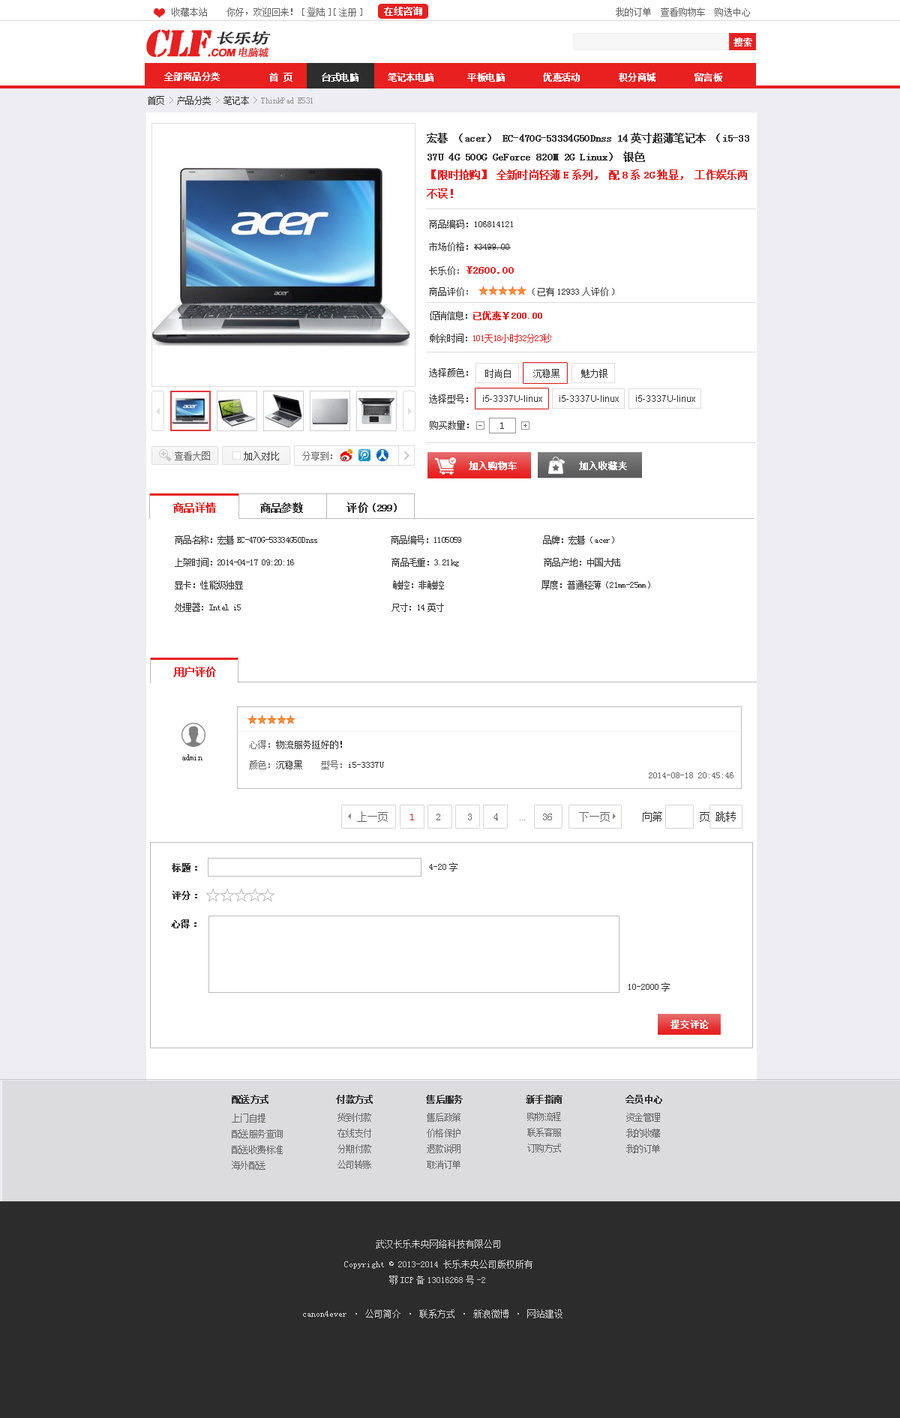
<style>
.page{position:relative;width:900px;height:1418px;background:#ffffff}
.page>*{position:absolute;margin:0}
.t1{font:9px "SimSun";color:#666666}
.t2{font:9px "SimSun";color:#ffffff;font-weight:bold}
.t3{font:34.5px "StencilStd";letter-spacing:-0.05em;color:#e82020;font-weight:bold;font-style:italic}
.t4{font:10.5px "StencilStd";letter-spacing:-0.05em;color:#e82020;font-weight:bold;font-style:italic}
.t5{font:10.5px "Arial-BoldMT";letter-spacing:-0.05em;color:#e82020;font-weight:bold;font-style:italic}
.t6{font:10.5px "AdobeHeitiStd-Regular";letter-spacing:-0.05em;color:#e82020;font-weight:bold;font-style:italic}
.t7{font:14.2px "AdobeHeitiStd-Regular";letter-spacing:-0.05em;color:#2d2d2d;font-weight:bold;font-style:italic;scale:1.26 1}
.t8{font:9px "SimSun";letter-spacing:-0.05em;color:#ffffff;font-weight:bold}
.t9{font:9px "SimSun";letter-spacing:-0.05em;color:#999999}
.t10{font:9px "SimSun";letter-spacing:-0.05em;color:#333333}
.t11{font:10.5px "SimSun";letter-spacing:-0.05em;color:#333333;font-weight:bold}
.t12{font:10.5px "SimSun";letter-spacing:-0.05em;color:#e82020;font-weight:bold}
.t13{font:9px/22.5px "SimSun";color:#333333}
.t14{font:9px/22.5px "SimSun";color:#666666}
.t15{font:10.5px/22.5px "SimSun";color:#e82020;font-weight:bold}
.t16{font:9px/18px "SimSun";letter-spacing:-0.05em;color:#e82020}
.t17{font:9px/18px "SimSun";letter-spacing:-0.05em;color:#333333}
.t18{font:9px/22.5px "SimSun";color:#e82020;font-weight:bold}
.t19{font:9px "SimSun";color:#333333}
.t20{font:9px "ArialMT";color:#333333}
.t21{font:10.5px "SimSun";letter-spacing:-0.05em;color:#333333}
.t22{font:7.5px "SimSun";letter-spacing:-0.05em;color:#666666}
.t23{font:9px/22.5px "SimSun";letter-spacing:-0.05em;color:#333333}
.t24{font:10.5px "SimSun";color:#666666}
.t25{font:10.5px "SimSun";color:#333333}
.t26{font:10.5px "SimSun";color:#e82020}
.t27{font:4.5px "SimSun";color:#666666}
.t28{font:9px "SimSun";color:#333333;font-weight:bold}
.t29{font:9px "SimSun";letter-spacing:-0.05em;color:#333333;font-weight:bold}
.t30{font:9px "SimSun";letter-spacing:-0.05em;color:#666666}
.t31{font:9px "SimSun";color:#d4d4d4}
.t32{font:13.5px "MicrosoftYaHei";color:#ffffff;font-weight:bold}
</style>
<div class="page">
<p class="t1" style="left:172px;top:8px;width:35px;height:8px">收藏本站</p>
<p class="t1" style="left:226px;top:8px;width:524px;height:8px">你好，欢迎回来！[登陆][注册]                                                        我的订单  查看购物车  购选中心</p>
<p class="t2" style="left:384px;top:7px;width:38px;height:9px">在线咨询</p>
<p class="t3" style="left:146px;top:29px;width:123px;height:29px">CLF<span class="t4">.</span><span class="t5">COM</span><span class="t6">电脑城</span></p>
<p class="t7" style="left:218px;top:31px;width:53px;height:14px">长乐坊</p>
<p class="t2" style="left:734px;top:38px;width:18px;height:8px">搜索</p>
<p class="t8" style="left:164px;top:72px;width:56px;height:9px">全部商品分类</p>
<p class="t8" style="left:269px;top:73px;width:453px;height:9px">首 页      台式电脑      笔记本电脑       平板电脑        优惠活动        积分商城        留言板</p>
<p class="t9" style="left:148px;top:96px;width:165px;height:9px"><span class="t10">首页 </span>&gt;<span class="t10"> 产品分类 </span>&gt;<span class="t10"> 笔记本 </span>&gt; ThinkPad E531</p>
<p class="t11" style="left:427px;top:133px;width:322px;height:66px">宏碁（acer） EC-470G-53334G50Dnss 14英寸超薄笔记本（i5-33<br>37U 4G 500G GeForce 820M 2G Linux）银色<br><span class="t12">【限时抢购】全新时尚轻薄E系列，配8系2G独显，工作娱乐两<br>不误！</span></p>
<p class="t13" style="left:429px;top:220px;width:185px;height:76px">商品编码：106814121<br>市场价格：¥3499.00<br>长乐价<span class="t14">： </span><span class="t15">¥2600.00<br></span>商品评价<span class="t14">：</span>             (已有12933人评价)</p>
<p class="t16" style="left:430px;top:311px;width:121px;height:32px"><span class="t17">促销信息：</span><span class="t18">已优惠￥200.00<br></span><span class="t17">剩余时间：</span>101天18小时32分23秒</p>
<p class="t19" style="left:429px;top:368px;width:39px;height:9px">选择颜色：</p>
<p class="t19" style="left:485px;top:369px;width:26px;height:9px">时尚白</p>
<p class="t19" style="left:533px;top:369px;width:27px;height:9px">沉稳黑</p>
<p class="t19" style="left:581px;top:369px;width:27px;height:9px">魅力银</p>
<p class="t19" style="left:429px;top:394px;width:39px;height:10px">选择型号：</p>
<p class="t20" style="left:483px;top:395px;width:59px;height:7px">i5-3337U-linux</p>
<p class="t20" style="left:560px;top:395px;width:59px;height:7px">i5-3337U-linux</p>
<p class="t20" style="left:636px;top:395px;width:59px;height:7px">i5-3337U-linux</p>
<p class="t19" style="left:430px;top:421px;width:39px;height:9px">购买数量：</p>
<p class="t21" style="left:500px;top:422px;width:4px;height:7px">1</p>
<p class="t22" style="left:524px;top:424px;width:3px;height:4px">+</p>
<p class="t2" style="left:469px;top:461px;width:48px;height:9px">加入购物车</p>
<p class="t2" style="left:579px;top:461px;width:48px;height:9px">加入收藏夹</p>
<p class="t11" style="left:173px;top:502px;width:224px;height:11px"><span class="t12">商品详情        </span>商品参数        评价(299)</p>
<p class="t23" style="left:175px;top:536px;width:475px;height:76px">商品名称：宏碁EC-470G-53334G50Dnss                  商品编号：1105059                    品牌：宏碁（acer）<br>上架时间：2014-04-17 09:20:16                        商品毛重：3.21kg                     商品产地：中国大陆<br>显卡：性能级独显                                     触控：非触控                        厚度：普通轻薄（21mm-25mm）<br>处理器：Intel i5                                     尺寸：14英寸</p>
<p class="t12" style="left:173px;top:667px;width:43px;height:10px">用户评价</p>
<p class="t19" style="left:249px;top:740px;width:93px;height:9px"><span class="t1">心得：</span>物流服务挺好的！</p>
<p class="t10" style="left:182px;top:754px;width:20px;height:6px">admin</p>
<p class="t19" style="left:249px;top:760px;width:135px;height:10px"><span class="t1">颜色：</span>沉稳黑<span class="t1">    型号：</span>i5-3337U</p>
<p class="t1" style="left:649px;top:772px;width:85px;height:6px">2014-08-18 20:45:46</p>
<p class="t24" style="left:357px;top:812px;width:31px;height:10px">上一页</p>
<p class="t25" style="left:410px;top:812px;width:326px;height:10px"><span class="t26">1</span><span class="t24">    2     3    4    </span><span class="t27">...</span><span class="t24">   36     下一页      </span>向第       页 跳转</p>
<p class="t28" style="left:172px;top:863px;width:25px;height:9px">标题：</p>
<p class="t19" style="left:429px;top:862px;width:29px;height:10px">4-20字</p>
<p class="t28" style="left:172px;top:891px;width:25px;height:9px">评分：</p>
<p class="t28" style="left:171px;top:920px;width:25px;height:8px">心得：</p>
<p class="t19" style="left:628px;top:982px;width:42px;height:10px">10-2000字</p>
<p class="t2" style="left:670px;top:1020px;width:39px;height:9px">提交评论</p>
<p class="t29" style="left:232px;top:1095px;width:430px;height:9px">配送方式              付款方式           售后服务             新手指南             会员中心</p>
<p class="t30" style="left:232px;top:1114px;width:51px;height:56px">上门自提<br>配送服务查询<br>配送收费标准<br>海外配送</p>
<p class="t30" style="left:338px;top:1113px;width:33px;height:56px">货到付款<br>在线支付<br>分期付款<br>公司转账</p>
<p class="t30" style="left:427px;top:1113px;width:33px;height:56px">售后政策<br>价格保护<br>退款说明<br>取消订单</p>
<p class="t30" style="left:527px;top:1112px;width:34px;height:41px">购物流程<br>联系客服<br>订购方式</p>
<p class="t30" style="left:626px;top:1113px;width:34px;height:41px">资金管理<br>我的收藏<br>我的订单</p>
<p class="t31" style="left:344px;top:1240px;width:188px;height:45px"><span class="t32">                         </span>武汉长乐未央网络科技有限公司<br>                  Copyright © 2013-2014 长乐未央公司版权所有<br>                            鄂ICP备13016268号-2</p>
<p class="t31" style="left:303px;top:1310px;width:259px;height:8px"><span class="t32">              </span>canon4ever · 公司简介 · 联系方式 · 新浪微博 · 网站建设</p>
</div>
